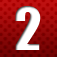
<style>
.page{position:relative;width:57px;height:57px}
.page>*{position:absolute;margin:0}
.t1{font:55px "Impact";letter-spacing:-0.005em;color:#ffffff}
</style>
<div class="page">
<p class="t1" style="left:15px;top:6px;width:26px;height:44px">2</p>
</div>
